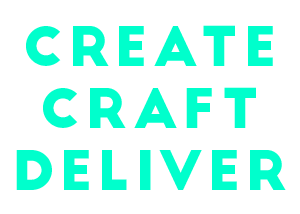
<style>
.page{position:relative;width:300px;height:214px;background:#ffffff}
.page>*{position:absolute;margin:0}
.t1{font:53.5px/61.9px "BigJohn";letter-spacing:0.1em;color:#00ffcc;text-transform:uppercase}
</style>
<div class="page">
<p class="t1" style="left:16px;top:25px;width:270px;height:165px;text-align:center">create<br>craft<br>deliver</p>
</div>
